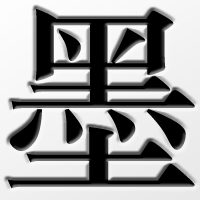
<style>
.page{position:relative;width:200px;height:200px}
.page>*{position:absolute;margin:0}
.t1{font:208.4px "STZhongsong";letter-spacing:0.025em;color:#000000}
</style>
<div class="page">
<p class="t1" style="left:7px;top:8px;width:188px;height:181px">墨</p>
</div>
